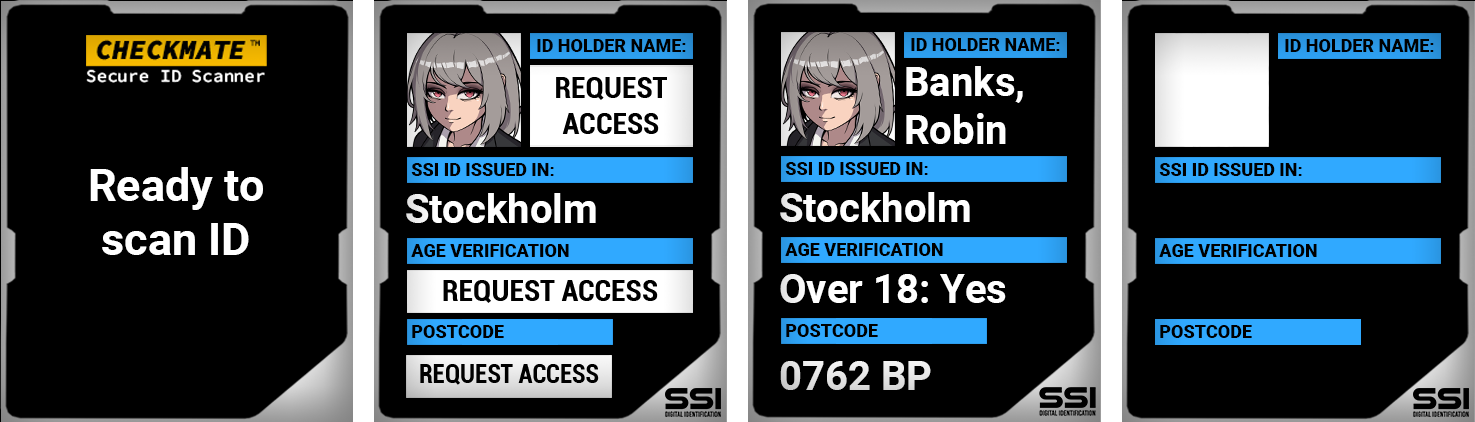
<style>
.page{position:relative;width:1475px;height:422px;background:#000000}
.page>*{position:absolute;margin:0}
.t1{font:18px "Roboto-Black";color:#000000}
.t2{font:30px "Roboto-BoldCondensed";color:#000000}
.t3{font:40px "Roboto-Bold";color:#ffffff}
.t4{font:45px "Roboto-Bold";color:#ffffff}
.t5{font:25px "Roboto-BoldCondensed";color:#000000}
.t6{font:40px "Roboto-Bold";color:#e5e5e5}
</style>
<div class="page">
<p class="t1" style="left:537px;top:39px;width:149px;height:13px">ID HOLDER NAME:</p>
<p class="t1" style="left:911px;top:38px;width:149px;height:13px">ID HOLDER NAME:</p>
<p class="t1" style="left:1285px;top:39px;width:149px;height:13px">ID HOLDER NAME:</p>
<p class="t2" style="left:556px;top:77px;width:111px;height:57px;text-align:center">REQUEST<br>ACCESS</p>
<p class="t3" style="left:906px;top:66px;width:117px;height:78px">Banks,<br>Robin</p>
<p class="t4" style="left:90px;top:167px;width:173px;height:88px;text-align:center">Ready to<br>scan ID</p>
<p class="t1" style="left:411px;top:163px;width:143px;height:13px">SSI ID ISSUED IN:</p>
<p class="t1" style="left:785px;top:162px;width:143px;height:13px">SSI ID ISSUED IN:</p>
<p class="t1" style="left:1159px;top:163px;width:143px;height:13px">SSI ID ISSUED IN:</p>
<p class="t3" style="left:406px;top:193px;width:190px;height:30px">Stockholm</p>
<p class="t3" style="left:780px;top:192px;width:190px;height:30px">Stockholm</p>
<p class="t1" style="left:411px;top:244px;width:158px;height:13px">AGE VERIFICATION</p>
<p class="t1" style="left:785px;top:243px;width:158px;height:13px">AGE VERIFICATION</p>
<p class="t1" style="left:1159px;top:244px;width:158px;height:13px">AGE VERIFICATION</p>
<p class="t2" style="left:443px;top:280px;width:215px;height:23px">REQUEST ACCESS</p>
<p class="t3" style="left:780px;top:274px;width:226px;height:29px">Over 18: Yes</p>
<p class="t1" style="left:412px;top:325px;width:92px;height:13px">POSTCODE</p>
<p class="t1" style="left:786px;top:324px;width:92px;height:13px">POSTCODE</p>
<p class="t1" style="left:1160px;top:325px;width:92px;height:13px">POSTCODE</p>
<p class="t5" style="left:420px;top:364px;width:179px;height:21px">REQUEST ACCESS</p>
<p class="t6" style="left:780px;top:361px;width:151px;height:29px">0762 BP</p>
</div>
